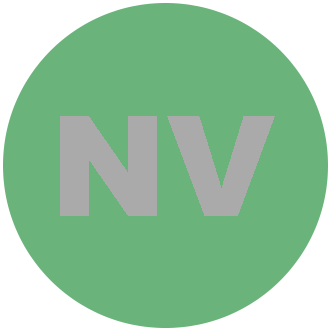
<style>
.page{position:relative;width:332px;height:332px;background:#6ab47b}
.page>*{position:absolute;margin:0}
.t1{font:140px "Arial-Black";color:#aaaaaa}
</style>
<div class="page">
<p class="t1" style="left:60px;top:116px;width:215px;height:100px">NV</p>
</div>
